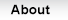
<style>
.page{position:relative;width:68px;height:20px}
.page>*{position:absolute;margin:0}
.t1{font:13.2px "Arial-BoldMT";color:#000000}
</style>
<div class="page">
<p class="t1" style="left:10px;top:4px;width:40px;height:11px">About</p>
</div>
